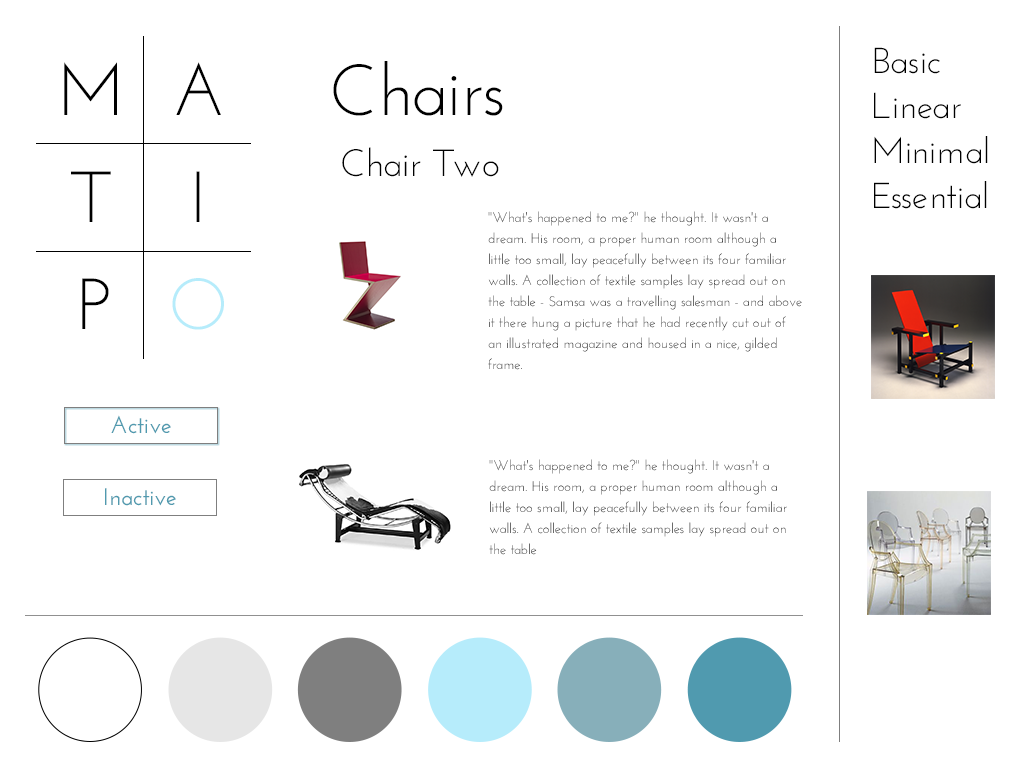
<style>
.page{position:relative;width:1024px;height:768px;background:#ffffff}
.page>*{position:absolute;margin:0}
.t1{font:36px "JosefinSans";color:#000000}
.t2{font:72px "JosefinSans";color:#000000}
.t3{font:38px "JosefinSans";color:#000000}
.t4{font:14px/21px "JosefinSans"}
.t5{font:72px "JosefinSans";color:#b6ecfb}
.t6{font:24px "JosefinSans-SemiBold";color:#509aaf}
</style>
<div class="page">
<p class="t1" style="left:874px;top:47px;width:66px;height:27px">Basic</p>
<p class="t2" style="left:64px;top:62px;width:53px;height:53px">M</p>
<p class="t2" style="left:176px;top:62px;width:45px;height:53px">A</p>
<p class="t2" style="left:333px;top:61px;width:170px;height:55px">Chairs</p>
<p class="t1" style="left:874px;top:92px;width:87px;height:27px">Linear</p>
<p class="t1" style="left:874px;top:136px;width:114px;height:28px">Minimal</p>
<p class="t3" style="left:342px;top:147px;width:157px;height:30px">Chair Two</p>
<p class="t2" style="left:71px;top:171px;width:40px;height:51px">T</p>
<p class="t2" style="left:196px;top:171px;width:4px;height:51px">I</p>
<p class="t1" style="left:874px;top:181px;width:113px;height:28px">Essential</p>
<p class="t4" style="left:488px;top:211px;width:314px;height:159px">"What's happened to me?" he thought. It wasn't a dream. His room, a proper human room although a little too small, lay peacefully between its four familiar walls. A collection of textile samples lay spread out on the table - Samsa was a travelling salesman - and above it there hung a picture that he had recently cut out of an illustrated magazine and housed in a nice, gilded frame.</p>
<p class="t2" style="left:82px;top:278px;width:27px;height:51px">P</p>
<p class="t5" style="left:172px;top:278px;width:52px;height:52px">O</p>
<p class="t6" style="left:111px;top:415px;width:60px;height:19px">Active</p>
<p class="t4" style="left:489px;top:459px;width:298px;height:96px">"What's happened to me?" he thought. It wasn't a dream. His room, a proper human room although a little too small, lay peacefully between its four familiar walls. A collection of textile samples lay spread out on the table</p>
<p class="t6" style="left:105px;top:488px;width:71px;height:18px">Inactive</p>
</div>
